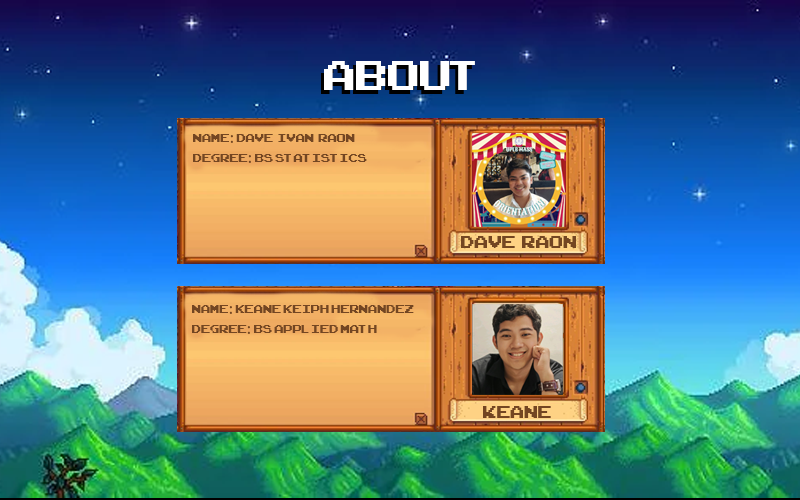
<style>
.page{position:relative;width:800px;height:500px}
.page>*{position:absolute;margin:0}
.t1{font:58.3px "ArcadeClassic";color:#ffffff}
.t2{font:16.7px "ArcadeClassic";color:#734622}
.t3{font:16.7px "MyriadPro-Regular";color:#734622}
.t4{font:25px "ArcadeClassic";color:#734622}
</style>
<div class="page">
<p class="t1" style="left:324px;top:61px;width:151px;height:29px">ABOUT</p>
<p class="t2" style="left:193px;top:134px;width:174px;height:29px">Name<span class="t3">: </span>Dave  IVAN  RAON<br>DEGREE<span class="t3">: </span>BS STATISTICS</p>
<p class="t4" style="left:461px;top:236px;width:115px;height:12px">Dave  RAON</p>
<p class="t2" style="left:192px;top:305px;width:222px;height:29px">Name<span class="t3">: </span>KEANE KEIPH HERNANDEZ<br>DEGREE<span class="t3">: </span>BS APPLIED MATH</p>
<p class="t4" style="left:483px;top:406px;width:68px;height:12px">KEANE</p>
</div>
